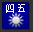
<style>
.page{position:relative;width:33px;height:32px;background:#000090}
.page>*{position:absolute;margin:0}
.t1{font:10.4px "SimSun";color:#ffffff}
</style>
<div class="page">
<p class="t1" style="left:6px;top:4px;width:19px;height:9px">四五</p>
</div>
